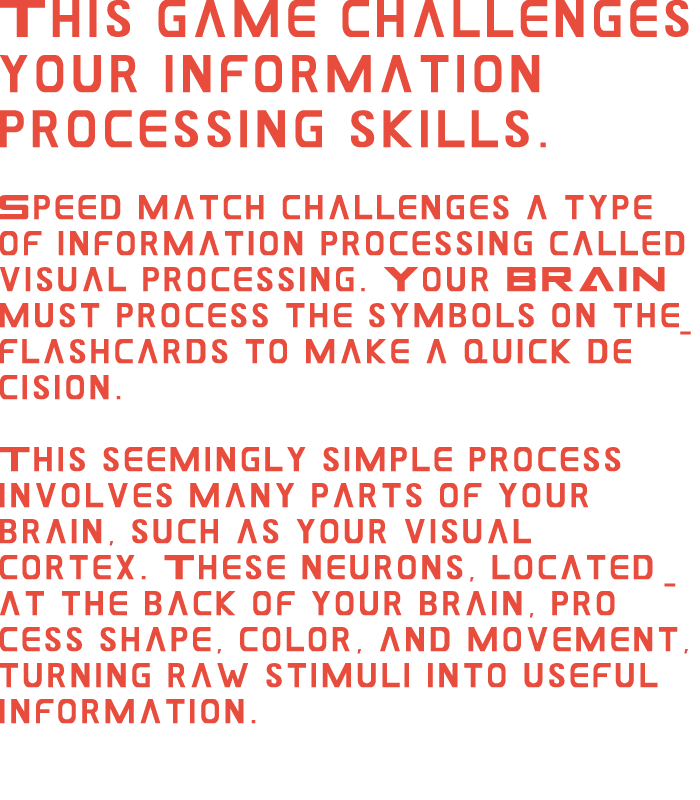
<style>
.page{position:relative;width:700px;height:800px;background:#ffffff}
.page>*{position:absolute;margin:0}
.t1{font:30px "GAMECUBENDualSet";color:#e74c3c}
.t2{font:46px "GAMECUBENDualSet";color:#e74c3c}
</style>
<div class="page">
<p class="t1" style="left:0px;top:0px;width:691px;height:724px"><span class="t2">This game challenges your information processing skills.<br></span><br>Speed match challenges a type of information processing called visual processing. Your BRAIN must process the symbols on the flashcards to make a quick decision.<br><br>This seemingly simple process involves many parts of your brain, such as your visual cortex. These neurons, located at the back of your brain, process shape, color, and movement, turning raw stimuli into useful information.</p>
</div>
